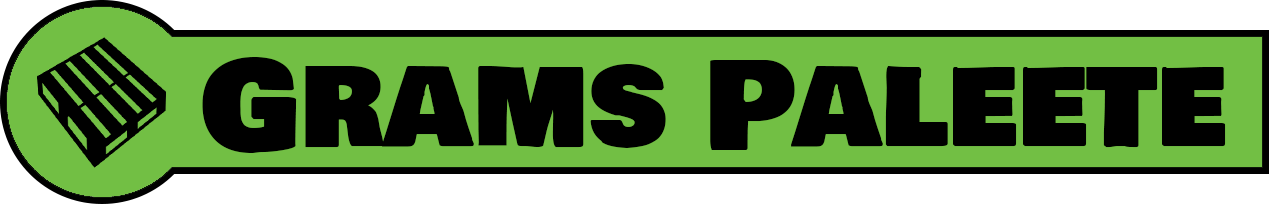
<style>
.page{position:relative;width:1269px;height:204px;background:#72bf44}
.page>*{position:absolute;margin:0}
.t1{font:122px "BowlbyOneSC-Regular";color:#000000}
</style>
<div class="page">
<p class="t1" style="left:202px;top:57px;width:1024px;height:96px">Grams Paleete</p>
</div>
